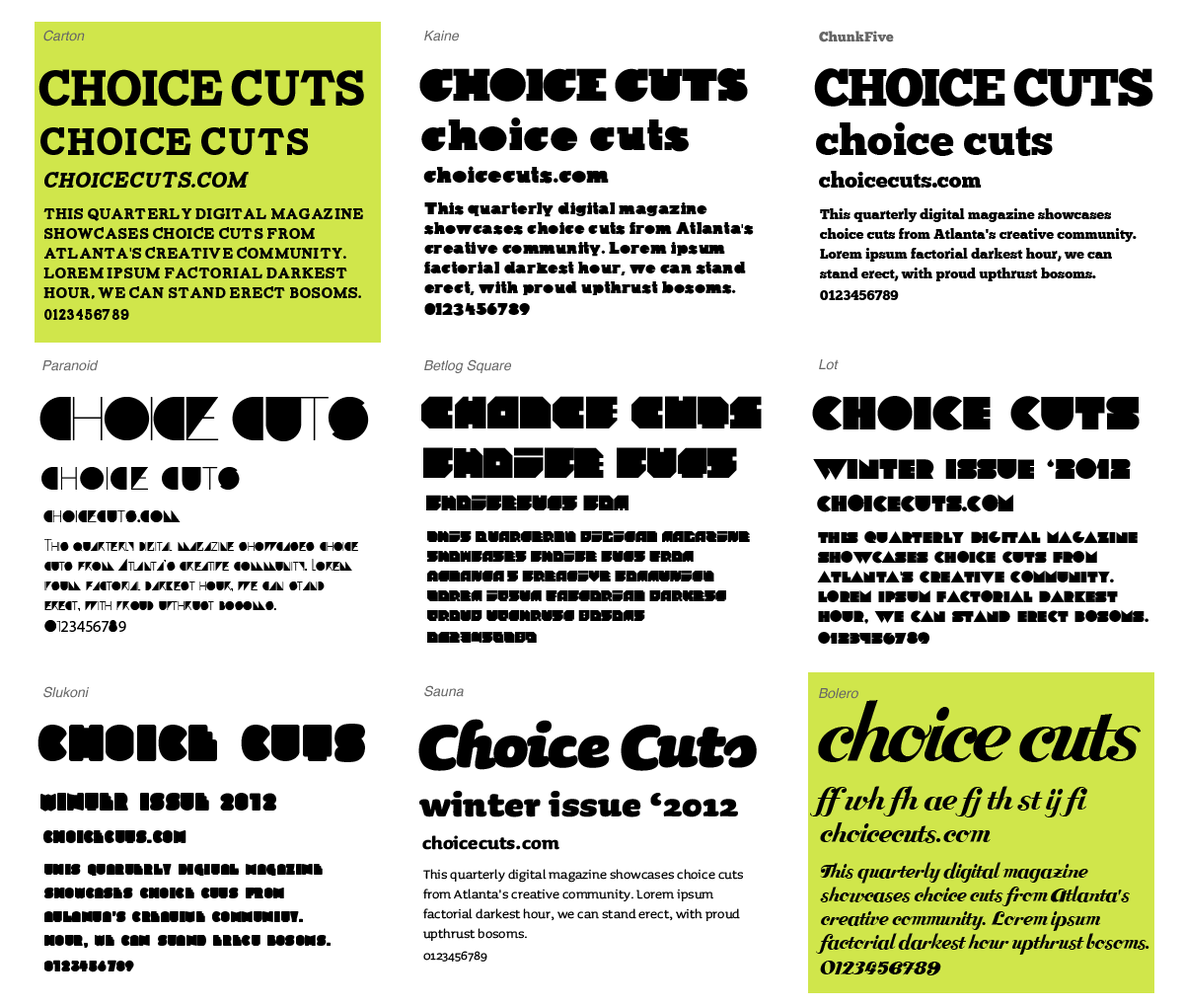
<style>
.page{position:relative;width:1184px;height:1007px;background:#ffffff}
.page>*{position:absolute;margin:0}
.t1{font:13.8px "Helvetica-Oblique";color:#666666}
.t2{font:13.8px "ChunkFive";color:#666666}
.t3{font:50.3px "Carton";letter-spacing:-0.05em;color:#000000;text-transform:uppercase}
.t4{font:45.4px "Kaine-Block";letter-spacing:-0.05em;color:#000000;text-transform:uppercase}
.t5{font:52.3px "ChunkFive";letter-spacing:-0.05em;color:#000000;text-transform:uppercase}
.t6{font:43.4px "Kaine-Block";color:#000000}
.t7{font:43.4px "ChunkFive";color:#000000}
.t8{font:38.5px "Carton";color:#000000}
.t9{font:21.7px "Carton";color:#000000;font-style:italic}
.t10{font:21.7px "Kaine-Block";color:#000000}
.t11{font:21.7px "ChunkFive";color:#000000}
.t12{font:15.8px/19.7px "Carton";color:#000000}
.t13{font:15.8px/19.7px "MyriadPro-Regular";color:#000000}
.t14{font:15.8px/19.7px "Kaine-Block";color:#000000}
.t15{font:13.8px/19.7px "ChunkFive";color:#000000}
.t16{font:62.2px "Paranoid";letter-spacing:-0.05em;color:#000000;text-transform:uppercase}
.t17{font:46.4px "Betlog_SquareQuikijiki";color:#000000;text-transform:uppercase}
.t18{font:46.4px "Lot";color:#000000;text-transform:uppercase}
.t19{font:43.4px "Betlog_SquareQuikijiki";color:#000000}
.t20{font:27.6px "Lot";color:#000000}
.t21{font:43.4px "Paranoid";color:#000000}
.t22{font:21.7px "Betlog_SquareQuikijiki";color:#000000}
.t23{font:21.7px "Lot";color:#000000}
.t24{font:21.7px "Paranoid";color:#000000}
.t25{font:15.8px/19.7px "Betlog_SquareQuikijiki";color:#000000}
.t26{font:15.8px/19.7px "Lot";color:#000000}
.t27{font:15.8px/19.7px "Paranoid";color:#000000}
.t28{font:63.2px "Bolero";letter-spacing:-0.05em;color:#000000}
.t29{font:52.3px "Slukoni-Medium";color:#000000}
.t30{font:72.1px "Sauna-BlackItalicSwash";letter-spacing:-0.04em;color:#000000}
.t31{font:24.7px "Bolero";color:#000000}
.t32{font:24.7px "Slukoni-Medium";color:#000000}
.t33{font:39.5px "Sauna-Black";color:#000000}
.t34{font:21.7px "Bolero";color:#000000}
.t35{font:17.8px "Slukoni-Medium";color:#000000}
.t36{font:21.7px "Sauna-Bold";color:#000000}
.t37{font:15.8px/23.7px "Slukoni-Medium";color:#000000}
.t38{font:15.8px/19.7px "Sauna-Roman";color:#000000}
.t39{font:15.8px/23.7px "Bolero";color:#000000}
</style>
<div class="page">
<p class="t1" style="left:43px;top:30px;width:42px;height:11px">Carton</p>
<p class="t1" style="left:424px;top:31px;width:35px;height:10px">Kaine</p>
<p class="t2" style="left:819px;top:31px;width:75px;height:11px">ChunkFive</p>
<p class="t3" style="left:38px;top:69px;width:326px;height:38px">choice cuts</p>
<p class="t4" style="left:419px;top:68px;width:329px;height:34px">choice cuts</p>
<p class="t5" style="left:814px;top:68px;width:340px;height:39px">choice cuts</p>
<p class="t6" style="left:421px;top:117px;width:268px;height:35px">choice cuts</p>
<p class="t7" style="left:816px;top:122px;width:237px;height:34px">choice cuts</p>
<p class="t8" style="left:40px;top:127px;width:268px;height:28px">choice cuts</p>
<p class="t9" style="left:44px;top:172px;width:205px;height:16px">choicecuts.com</p>
<p class="t10" style="left:423px;top:166px;width:186px;height:18px">choicecuts.com</p>
<p class="t11" style="left:819px;top:171px;width:163px;height:17px">choicecuts.com</p>
<p class="t12" style="left:43px;top:208px;width:320px;height:112px">This quarterly digital magazine showcases choice cuts from Atlanta<span class="t13">'</span>s creative community. Lorem ipsum factorial darkest hour, we can stand erect bosoms.<br>0123456789</p>
<p class="t14" style="left:424px;top:202px;width:330px;height:114px">This quarterly digital magazine showcases choice cuts from Atlanta's creative community. Lorem ipsum factorial darkest hour, we can stand erect, with proud upthrust bosoms.<br>0123456789</p>
<p class="t15" style="left:820px;top:208px;width:317px;height:92px">This quarterly digital magazine showcases choice cuts from Atlanta's creative community. Lorem ipsum factorial darkest hour, we can stand erect, with proud upthrust bosoms.<br>0123456789</p>
<p class="t1" style="left:42px;top:360px;width:57px;height:11px">Paranoid</p>
<p class="t1" style="left:424px;top:359px;width:87px;height:14px">Betlog Square</p>
<p class="t1" style="left:819px;top:359px;width:20px;height:11px">Lot</p>
<p class="t16" style="left:39px;top:397px;width:330px;height:44px">choice cuts</p>
<p class="t17" style="left:421px;top:396px;width:341px;height:32px">choice cuts</p>
<p class="t18" style="left:812px;top:396px;width:328px;height:34px">choice cuts</p>
<p class="t19" style="left:423px;top:447px;width:314px;height:31px">choice cuts</p>
<p class="t20" style="left:813px;top:458px;width:318px;height:22px">winter issue ‘2012</p>
<p class="t21" style="left:41px;top:467px;width:199px;height:24px">choice cuts</p>
<p class="t22" style="left:426px;top:494px;width:203px;height:16px">choicecuts.com</p>
<p class="t23" style="left:817px;top:494px;width:197px;height:18px">choicecuts.com</p>
<p class="t24" style="left:43px;top:510px;width:138px;height:12px">choicecuts.com</p>
<p class="t25" style="left:427px;top:531px;width:323px;height:112px">This quarterly digital magazine showcases choice cuts from Atlanta's creative community. Lorem ipsum factorial darkest proud upthrust bosoms.<br>0123456789</p>
<p class="t26" style="left:817px;top:531px;width:332px;height:114px">This quarterly digital magazine showcases choice cuts from Atlanta<span class="t13">'</span>s creative community. Lorem ipsum factorial darkest hour, we can stand erect bosoms.<br>0123456789</p>
<p class="t27" style="left:44px;top:539px;width:314px;height:93px">This quarterly digital magazine showcases choice cuts from Atlanta's creative community. Lorem ipsum factorial darkest hour, we can stand erect, with proud upthrust bosoms.<br>01<span class="t13">234567</span>8<span class="t13">9</span></p>
<p class="t1" style="left:43px;top:686px;width:46px;height:12px">Slukoni</p>
<p class="t1" style="left:424px;top:685px;width:40px;height:12px">Sauna</p>
<p class="t1" style="left:819px;top:688px;width:40px;height:11px">Bolero</p>
<p class="t28" style="left:818px;top:700px;width:324px;height:62px">choice cuts</p>
<p class="t29" style="left:38px;top:723px;width:327px;height:39px">choice cuts</p>
<p class="t30" style="left:418px;top:719px;width:339px;height:52px">Choice Cuts</p>
<p class="t31" style="left:810px;top:786px;width:278px;height:31px">ff wh fh ae fj th st ij fi</p>
<p class="t32" style="left:40px;top:793px;width:236px;height:18px">winter issue 2012</p>
<p class="t33" style="left:419px;top:791px;width:319px;height:26px">winter issue ‘2012</p>
<p class="t34" style="left:820px;top:821px;width:171px;height:22px">choicecuts.com</p>
<p class="t35" style="left:43px;top:830px;width:144px;height:13px">choicecuts.com</p>
<p class="t36" style="left:422px;top:835px;width:138px;height:15px">choicecuts.com</p>
<p class="t37" style="left:44px;top:864px;width:287px;height:108px">This quarterly digital magazine showcases choice cuts from Atlanta's creative community. hour, we can stand erect bosoms.<br>0123456789</p>
<p class="t38" style="left:423px;top:869px;width:320px;height:92px">This quarterly digital magazine showcases choice cuts from Atlanta's creative community. Lorem ipsum factorial darkest hour, we can stand erect, with proud upthrust bosoms.<br>0123456789</p>
<p class="t39" style="left:816px;top:862px;width:334px;height:113px">This quarterly digital magazine showcases choice cuts from Atlanta's creative community. Lorem ipsum factorial darkest hour upthrust bosoms.<br>0123456789</p>
</div>
